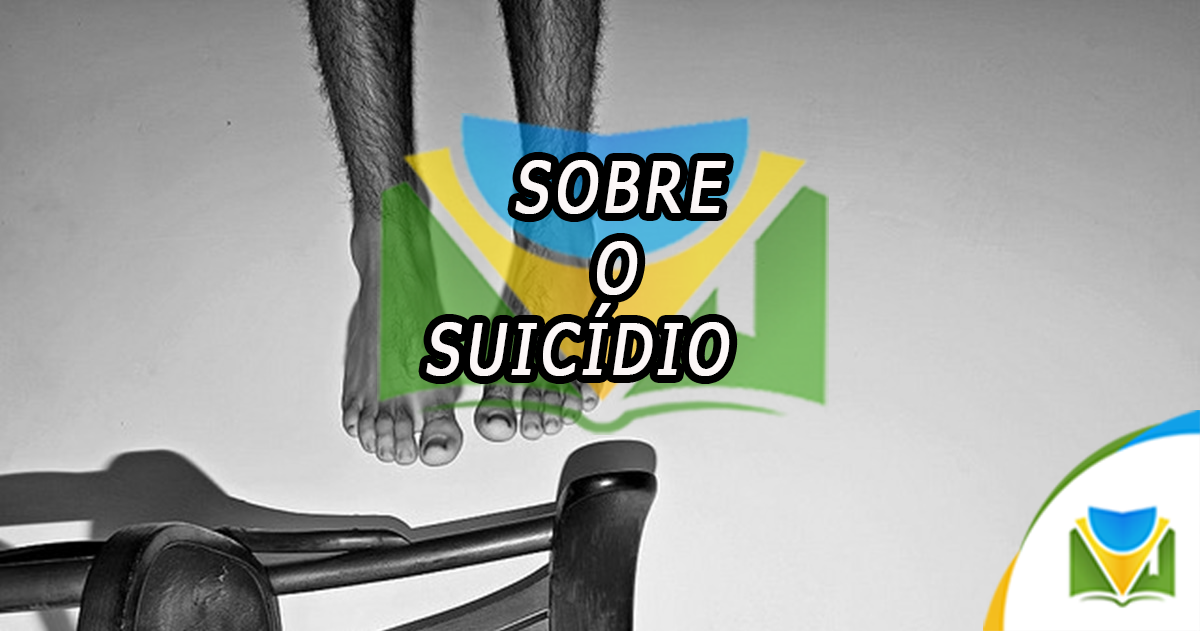
<style>
.page{position:relative;width:1200px;height:631px}
.page>*{position:absolute;margin:0}
.t1{font:70.4px/27px "Tahoma";letter-spacing:0.1em;color:#fdf8f8;text-transform:uppercase;font-weight:bold;font-style:italic;scale:0.82 1}
.t2{font:36.7px/27px "Tahoma";letter-spacing:0.1em;color:#fdf8f8;text-transform:uppercase;font-weight:bold;font-style:italic;scale:0.82 1}
</style>
<div class="page">
<p class="t1" style="left:426px;top:160px;width:304px;height:216px;text-align:center"><span class="t2">    </span>  sobre<br> <br><br>   o<br> <br><br>suicídio</p>
</div>
